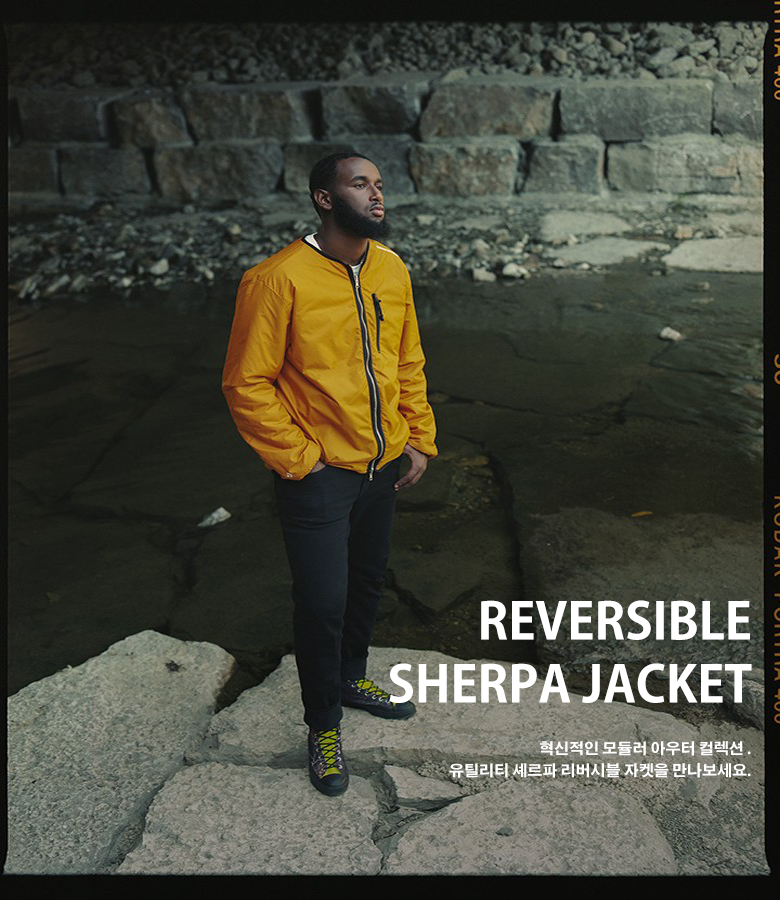
<style>
.page{position:relative;width:780px;height:900px}
.page>*{position:absolute;margin:0}
.t1{font:50px/63px "AdobeGothicStd-Bold";color:#ffffff}
.t2{font:15px/22px "AdobeGothicStd-Bold";color:#ffffff}
</style>
<div class="page">
<p class="t1" style="left:389px;top:600px;width:363px;height:103px;text-align:right">REVERSIBLE<br>SHERPA JACKET</p>
<p class="t2" style="left:449px;top:741px;width:302px;height:37px;text-align:right">혁신적인 모듈러 아우터 컬렉션 .<br>유틸리티 셰르파 리버시블 자켓을 만나보세요.</p>
</div>
